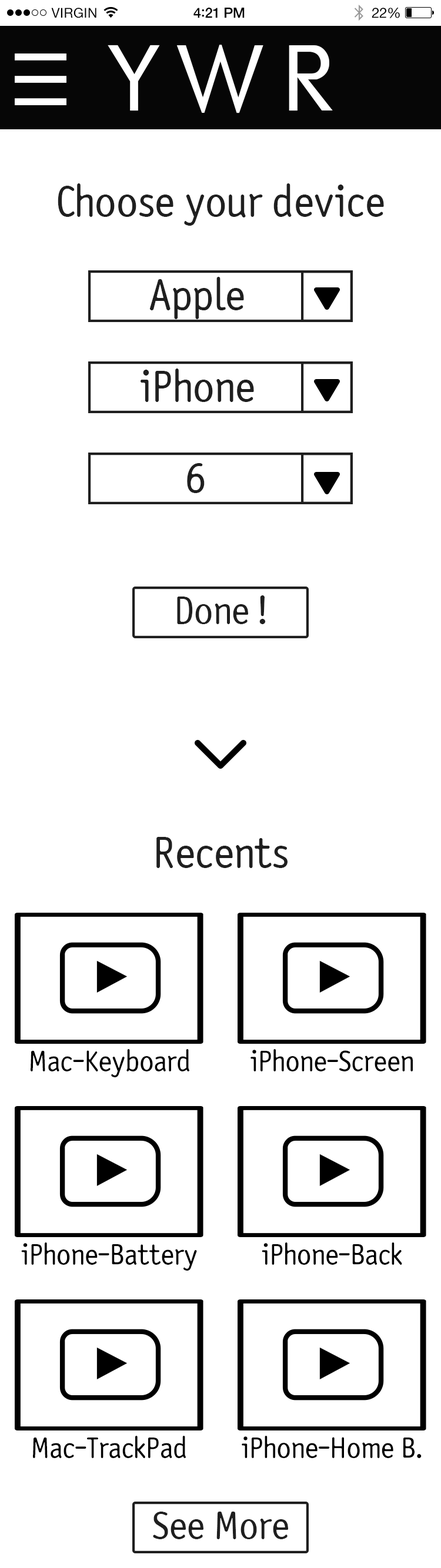
<style>
.page{position:relative;width:441px;height:1568px;background:#ffffff}
.page>*{position:absolute;margin:0}
.t1{font:13.5px "HelveticaNeue";letter-spacing:0.02em;color:#000000}
.t2{font:14.1px "HelveticaNeue-Medium";letter-spacing:-0.02em;color:#000000}
.t3{font:15.3px "Avenir-Medium";letter-spacing:-0.02em;color:#000000}
.t4{font:14.1px "HelveticaNeue";letter-spacing:-0.02em;color:#000000}
.t5{font:88.2px "FuturistFixedWidth-Regular";letter-spacing:-0.02em;color:#ffffff}
.t6{font:44.1px "SaturdaySansICG";letter-spacing:-0.02em;color:#1f1f1f}
.t7{font:39.2px "SaturdaySansICG";letter-spacing:-0.02em;color:#1f1f1f}
.t8{font:29.4px "SaturdaySansICG";letter-spacing:-0.02em;color:#000000}
</style>
<div class="page">
<p class="t1" style="left:51px;top:8px;width:45px;height:10px">VIRGIN</p>
<p class="t2" style="left:193px;top:8px;width:51px;height:10px">4<span class="t3">:</span>21 PM</p>
<p class="t4" style="left:371px;top:8px;width:29px;height:10px">22%</p>
<p class="t5" style="left:108px;top:45px;width:225px;height:68px">YWR</p>
<p class="t6" style="left:58px;top:183px;width:326px;height:43px">Choose your device</p>
<p class="t6" style="left:149px;top:277px;width:95px;height:42px">Apple</p>
<p class="t6" style="left:140px;top:368px;width:114px;height:34px">iPhone</p>
<p class="t6" style="left:187px;top:463px;width:18px;height:30px">6</p>
<p class="t7" style="left:177px;top:595px;width:89px;height:29px">Done !</p>
<p class="t6" style="left:156px;top:837px;width:131px;height:31px">Recents</p>
<p class="t8" style="left:31px;top:1049px;width:158px;height:28px">Mac-Keyboard</p>
<p class="t8" style="left:250px;top:1049px;width:163px;height:22px">iPhone-Screen</p>
<p class="t8" style="left:21px;top:1242px;width:176px;height:29px">iPhone-Battery</p>
<p class="t8" style="left:262px;top:1242px;width:140px;height:23px">iPhone-Back</p>
<p class="t8" style="left:33px;top:1436px;width:153px;height:22px">Mac-TrackPad</p>
<p class="t8" style="left:242px;top:1436px;width:179px;height:22px">iPhone-Home B.</p>
<p class="t7" style="left:153px;top:1512px;width:135px;height:27px">See More</p>
</div>
